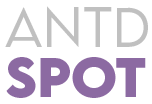
<style>
.page{position:relative;width:152px;height:104px;background:#ffffff}
.page>*{position:absolute;margin:0}
.t1{font:49.9px/50px "LEMONMILK-Light";color:#b9b9b9}
.t2{font:49.9px/50px "LEMONMILK-Bold";color:#805a98}
</style>
<div class="page">
<p class="t1" style="left:5px;top:6px;width:143px;height:92px;opacity:0.9">antD<br><span class="t2">SPOT</span></p>
</div>
